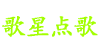
<style>
.page{position:relative;width:100px;height:50px;background:#ffffff}
.page>*{position:absolute;margin:0}
.t1{font:24px "¿¬Ìå";color:#a2ff00;font-weight:bold}
</style>
<div class="page">
<p class="t1" style="left:2px;top:16px;width:96px;height:21px">歌星点歌</p>
</div>
